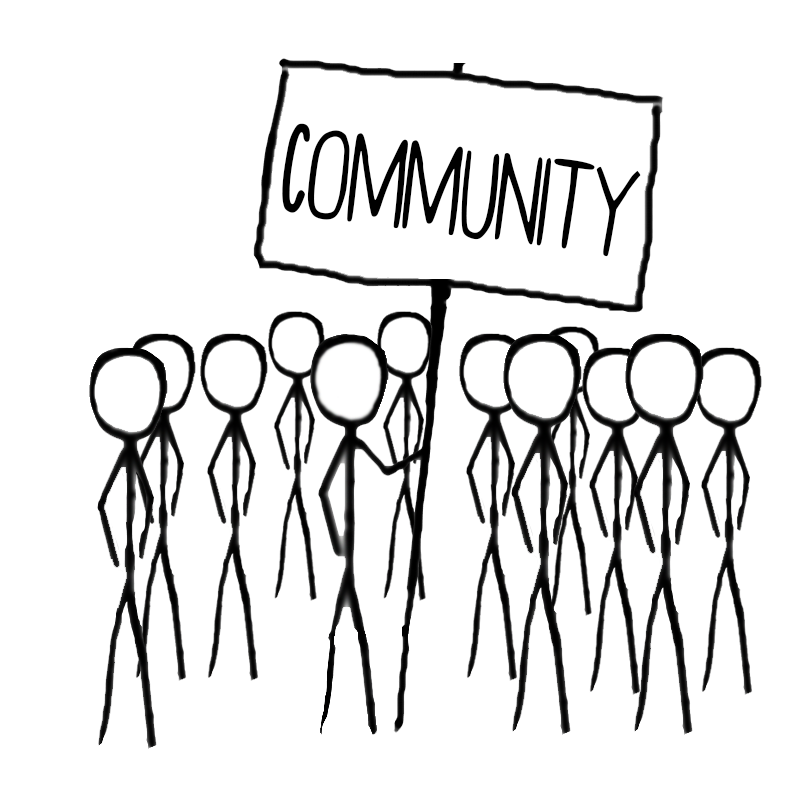
<style>
.page{position:relative;width:800px;height:800px;background:#ffffff}
.page>*{position:absolute;margin:0}
.t1{font:129.9px "SKOYArwahTuyul";color:#000000}
</style>
<div class="page">
<p class="t1" style="left:282px;top:123px;width:359px;height:134px;rotate:7deg">Community</p>
</div>
